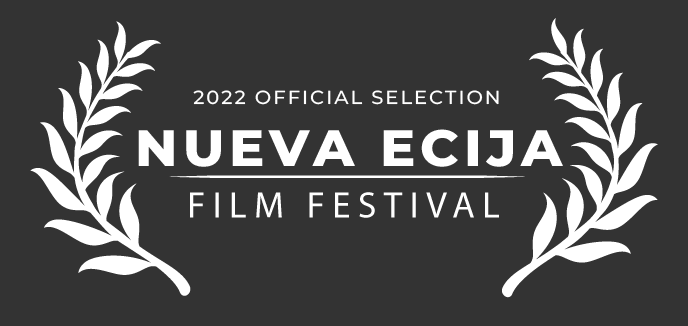
<style>
.page{position:relative;width:688px;height:326px;background:#333333}
.page>*{position:absolute;margin:0}
.t1{font:19px "Montserrat-Medium";letter-spacing:0.1em;color:#ffffff;scale:1.03 1}
.t2{font:51px "Montserrat-ExtraBold";letter-spacing:0.1em;color:#ffffff;scale:1.03 1}
</style>
<div class="page">
<p class="t1" style="left:138px;top:90px;width:425px;height:77px;text-align:center">2022 OFFICIAL SELECTION<br><span class="t2">NUEVA ECIJA</span></p>
</div>
